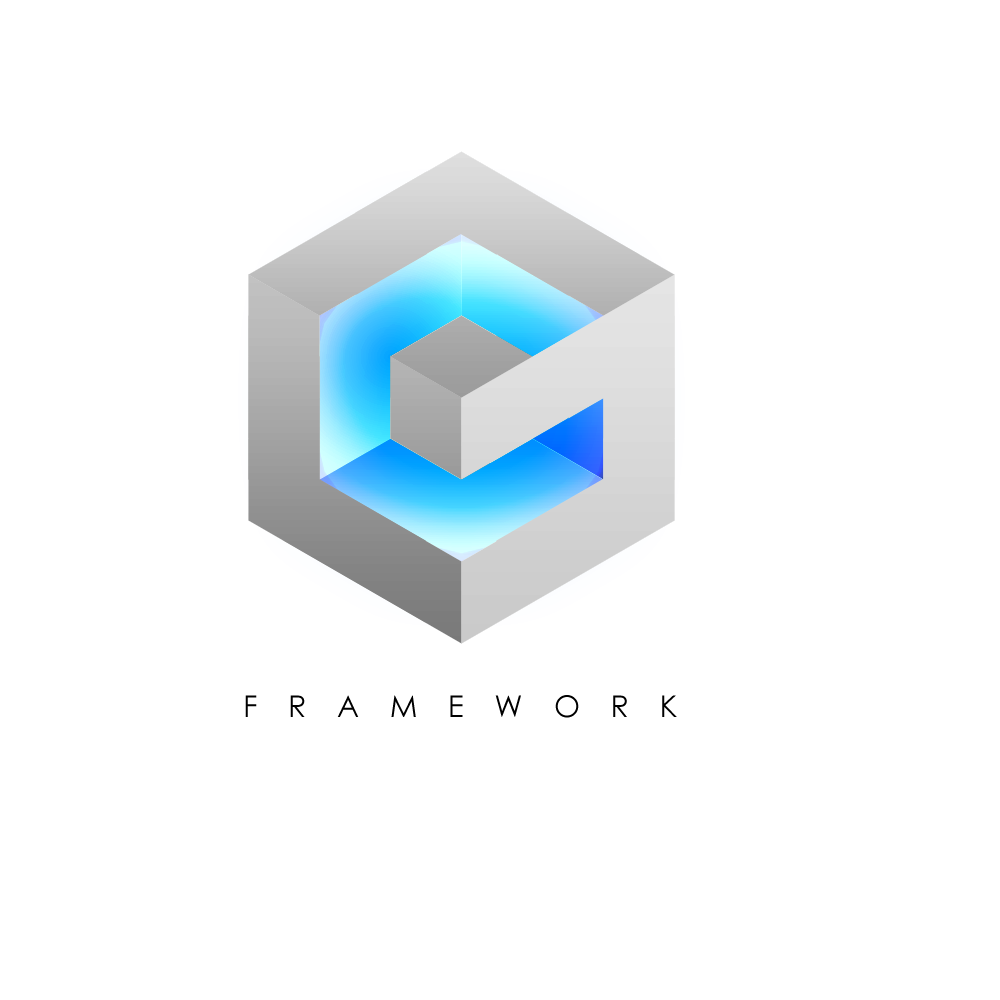
<style>
.page{position:relative;width:1000px;height:1000px;background:#ffffff}
.page>*{position:absolute;margin:0}
.t1{font:30px "CenturyGothic";letter-spacing:1.02em;color:#000000;text-transform:uppercase}
</style>
<div class="page">
<p class="t1" style="left:245px;top:695px;width:432px;height:23px">Framework</p>
</div>
